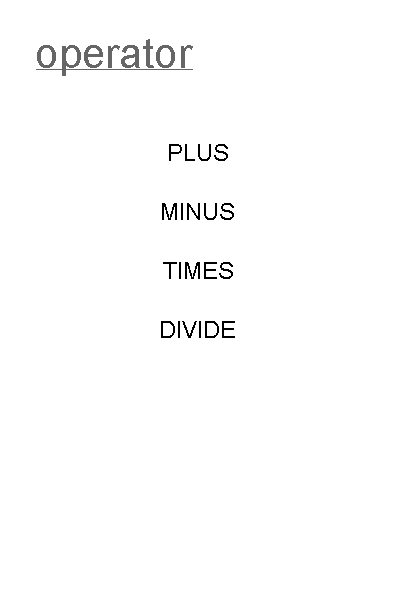
<style>
.page{position:relative;width:396px;height:612px;background:#ffffff}
.page>*{position:absolute;margin:0}
.t1{font:42px "ArialMT";color:#666666}
.t2{font:12px "ArialMT";color:#000000}
</style>
<div class="page">
<p class="t1" style="left:37px;top:39px;width:156px;height:37px">operator</p>
<p class="t2" style="left:169px;top:144px;width:59px;height:17px">PLUS</p>
<p class="t2" style="left:162px;top:203px;width:72px;height:17px">MINUS</p>
<p class="t2" style="left:163px;top:262px;width:70px;height:17px">TIMES</p>
<p class="t2" style="left:161px;top:321px;width:74px;height:17px">DIVIDE</p>
</div>
